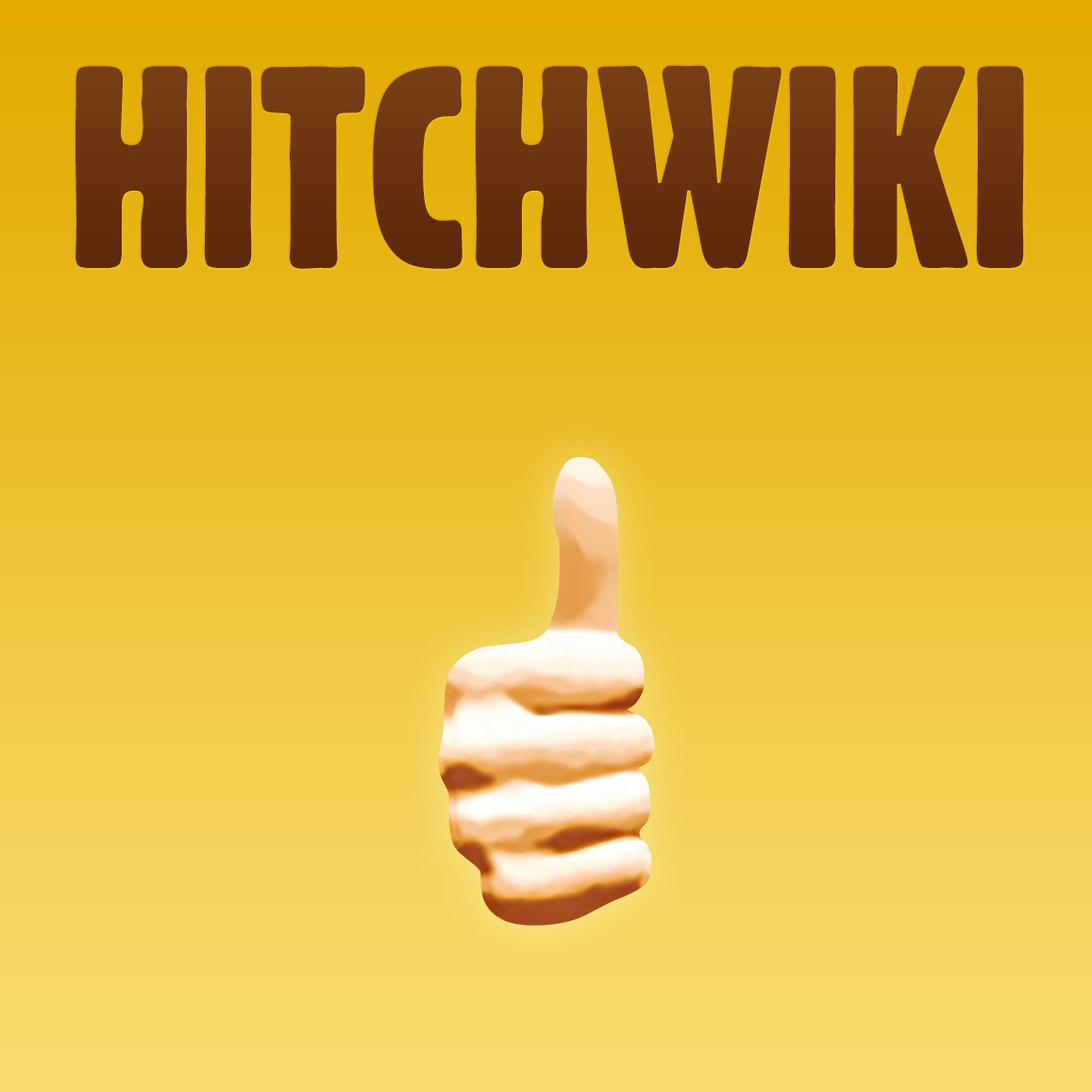
<style>
.page{position:relative;width:1092px;height:1092px}
.page>*{position:absolute;margin:0}
.t1{font:280.1px "Gothic821CondensedBT-Regular";color:#69310e;text-transform:uppercase}
</style>
<div class="page">
<p class="t1" style="left:75px;top:65px;width:949px;height:204px">Hitchwiki</p>
</div>
